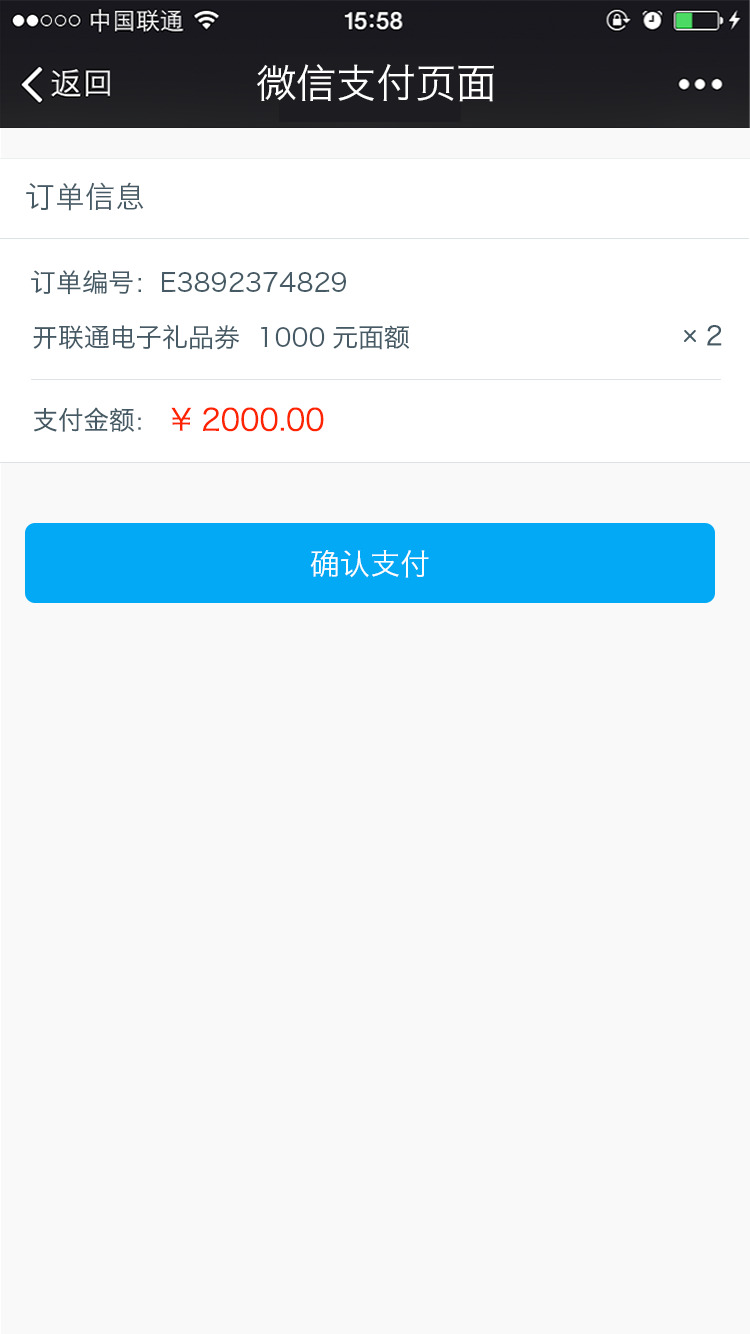
<style>
.page{position:relative;width:750px;height:1334px;background:#f9f9f9}
.page>*{position:absolute;margin:0}
.t1{font:40px "HiraginoSansGB-W3";color:#ffffff}
.t2{font:30px "HiraginoSansGB-W3";color:#455a64}
.t3{font:26px "HiraginoSansGB-W3";color:#455a64}
.t4{font:22.4px "HiraginoSansGB-W3";color:#455a64}
.t5{font:30px "HiraginoSansGB-W3";color:#ff2400}
.t6{font:26.5px "HiraginoSansGB-W3";color:#ff2400}
.t7{font:30px "HiraginoSansGB-W3";color:#ffffff}
</style>
<div class="page">
<p class="t1" style="left:257px;top:64px;width:237px;height:38px">微信支付页面</p>
<p class="t2" style="left:26px;top:182px;width:118px;height:29px">订单信息</p>
<p class="t3" style="left:31px;top:270px;width:315px;height:25px">订单编号：E3892374829</p>
<p class="t3" style="left:33px;top:324px;width:377px;height:26px">开联通电子礼品券  1000元面额</p>
<p class="t3" style="left:707px;top:325px;width:15px;height:21px">2</p>
<p class="t3" style="left:34px;top:407px;width:107px;height:25px">支付金额<span class="t4">：</span></p>
<p class="t5" style="left:171px;top:407px;width:153px;height:25px"><span class="t6">   </span>¥ 2000.00</p>
<p class="t7" style="left:310px;top:550px;width:119px;height:28px">确认支付</p>
</div>
